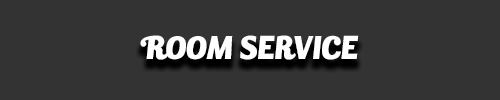
<style>
.page{position:relative;width:500px;height:100px;background:#333333}
.page>*{position:absolute;margin:0}
.t1{font:30px "BullettoKilla";color:#ffffff}
</style>
<div class="page">
<p class="t1" style="left:140px;top:35px;width:219px;height:25px">ROOM SERVICE</p>
</div>
